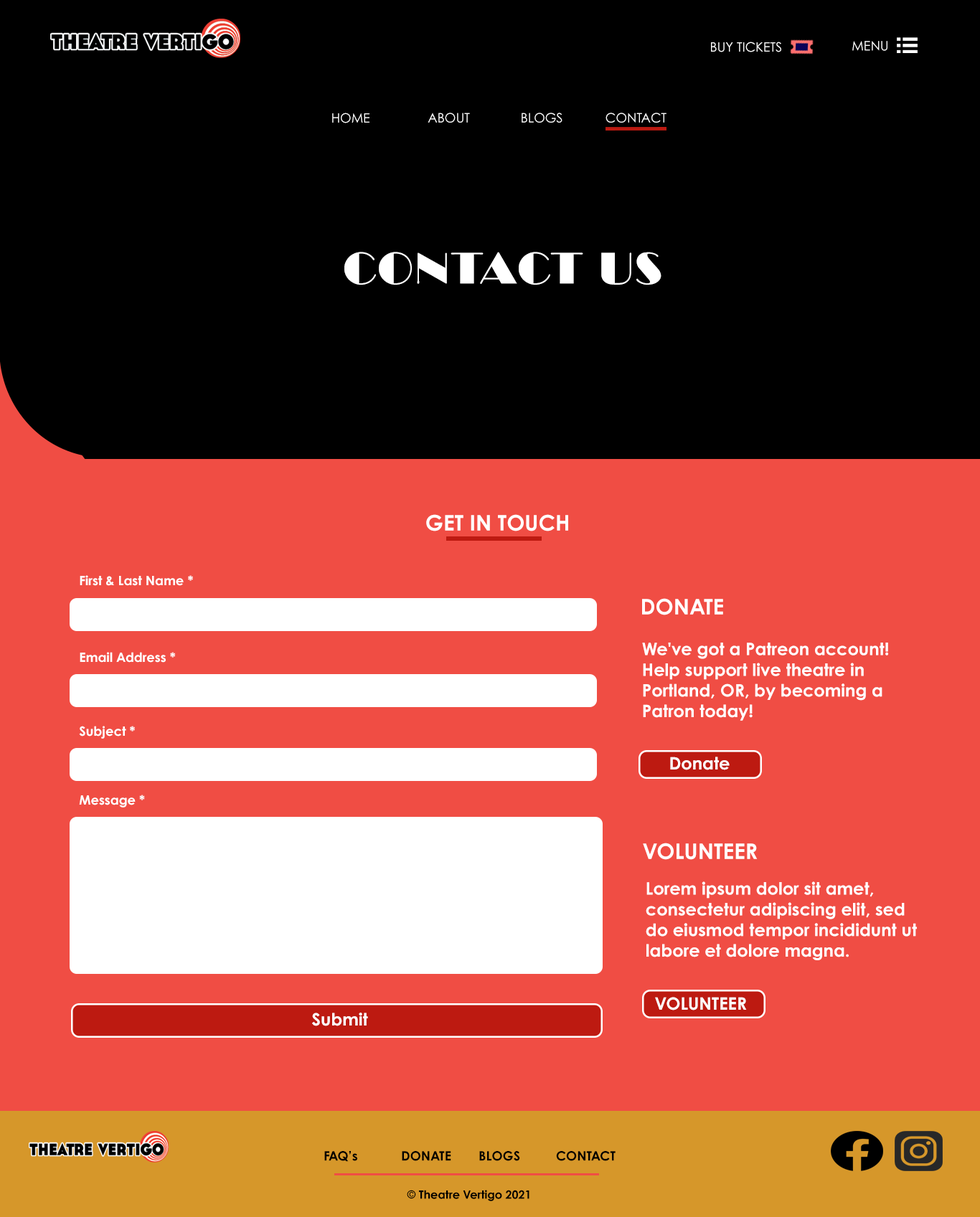
<style>
.page{position:relative;width:980px;height:1217px;background:#000000}
.page>*{position:absolute;margin:0}
.t1{font:12.9px "CenturyGothicPro";color:#ffffff}
.t2{font:44px "LTCBroadway-Regular";color:#ffffff}
.t3{font:21.5px "CenturyGothicPro-Bold";color:#ffffff}
.t4{font:12.9px "CenturyGothicPro-Bold";color:#ffffff}
.t5{font:17.2px "CenturyGothicPro-Bold";color:#ffffff}
.t6{font:12.9px "CenturyGothicPro-Bold";color:#000000}
.t7{font:11.5px "CenturyGothicPro-Bold";color:#000000}
</style>
<div class="page">
<p class="t1" style="left:711px;top:42px;width:70px;height:10px">BUY TICKETS</p>
<p class="t1" style="left:852px;top:41px;width:35px;height:10px">MENU</p>
<p class="t1" style="left:332px;top:113px;width:37px;height:10px">HOME</p>
<p class="t1" style="left:427px;top:113px;width:43px;height:10px">ABOUT</p>
<p class="t1" style="left:521px;top:113px;width:41px;height:10px">BLOGS</p>
<p class="t1" style="left:605px;top:113px;width:61px;height:10px">CONTACT</p>
<p class="t2" style="left:344px;top:252px;width:317px;height:33px">CONTACT US</p>
<p class="t3" style="left:426px;top:514px;width:142px;height:17px">GET IN TOUCH</p>
<p class="t4" style="left:80px;top:575px;width:113px;height:11px">First &amp; Last Name *</p>
<p class="t3" style="left:642px;top:598px;width:81px;height:17px">DONATE</p>
<p class="t4" style="left:80px;top:652px;width:96px;height:11px">Email Address *</p>
<p class="t5" style="left:642px;top:643px;width:247px;height:78px">We've got a Patreon account! Help support live theatre in Portland, OR, by becoming a Patron today!</p>
<p class="t4" style="left:79px;top:726px;width:56px;height:13px">Subject *</p>
<p class="t5" style="left:670px;top:757px;width:59px;height:13px">Donate</p>
<p class="t4" style="left:79px;top:795px;width:66px;height:13px">Message *</p>
<p class="t3" style="left:643px;top:843px;width:114px;height:17px">VOLUNTEER</p>
<p class="t5" style="left:645px;top:881px;width:272px;height:79px">Lorem ipsum dolor sit amet, consectetur adipiscing elit, sed do eiusmod tempor incididunt ut labore et dolore magna.</p>
<p class="t5" style="left:655px;top:997px;width:92px;height:14px">VOLUNTEER</p>
<p class="t5" style="left:312px;top:1013px;width:56px;height:13px">Submit</p>
<p class="t6" style="left:324px;top:1151px;width:291px;height:11px">FAQ’s  DONATE  BLOGS  CONTACT</p>
<p class="t7" style="left:407px;top:1190px;width:122px;height:11px">© Theatre Vertigo 2021</p>
</div>
